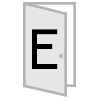
<style>
.page{position:relative;width:100px;height:100px;background:#ffffff}
.page>*{position:absolute;margin:0}
.t1{font:53.1px "Small Fonts";color:#010101;scale:1.22 1}
</style>
<div class="page">
<p class="t1" style="left:32px;top:29px;width:26px;height:40px">E</p>
</div>
